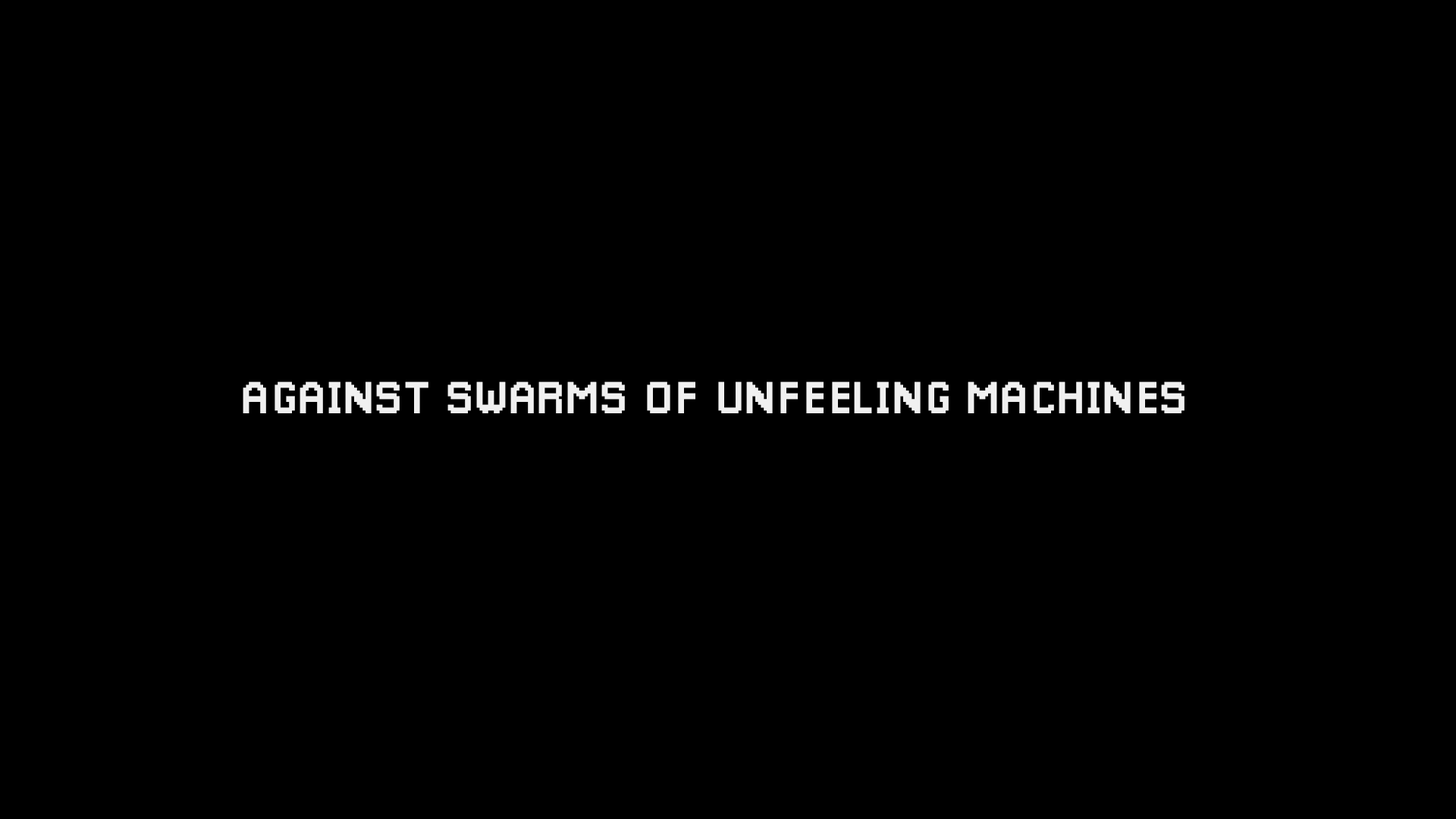
<style>
.page{position:relative;width:1456px;height:819px;background:#000000}
.page>*{position:absolute;margin:0}
.t1{font:45.5px "Pixellari";color:#f0f0f0}
</style>
<div class="page">
<p class="t1" style="left:243px;top:381px;width:942px;height:32px">AGAINST SWARMS OF UNFEELING MACHINES</p>
</div>
